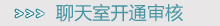
<style>
.page{position:relative;width:220px;height:26px;background:#e8e6e7}
.page>*{position:absolute;margin:0}
.t1{font:18px "MicrosoftYaHei";letter-spacing:0.01em;color:#4895a3}
</style>
<div class="page">
<p class="t1" style="left:56px;top:3px;width:127px;height:19px">聊天室开通审核</p>
</div>
